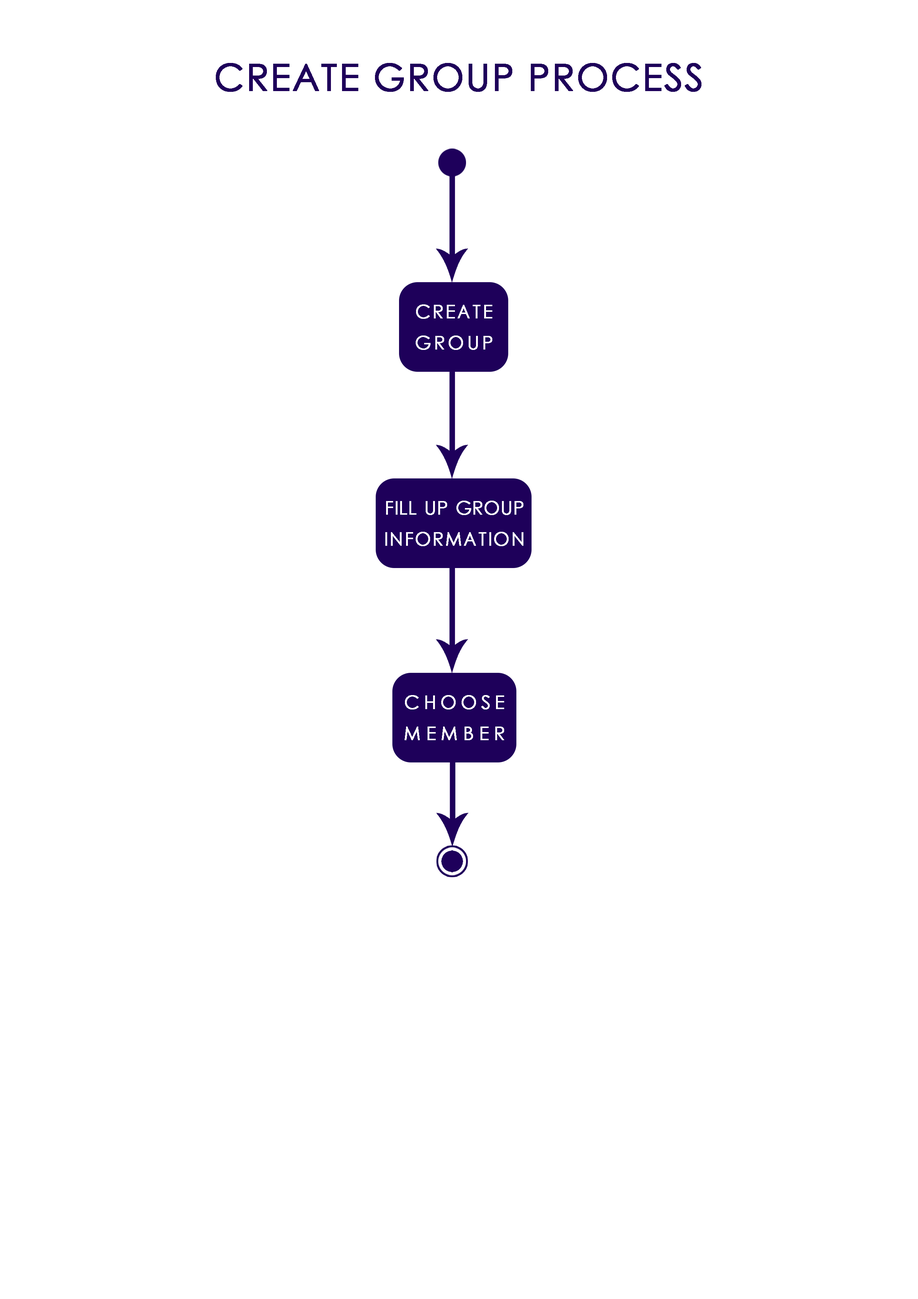
<style>
.page{position:relative;width:918px;height:1299px;background:#ffffff}
.page>*{position:absolute;margin:0}
.t1{font:37px "CenturyGothic";letter-spacing:0.025em;color:#1e005a;text-transform:uppercase;font-weight:bold}
.t2{font:18.5px/30.9px "CenturyGothic";letter-spacing:0.025em;color:#ffffff;text-transform:uppercase;font-weight:bold}
.t3{font:18.5px/30.9px "CenturyGothic";color:#ffffff;text-transform:uppercase;font-weight:bold}
</style>
<div class="page">
<p class="t1" style="left:216px;top:63px;width:486px;height:29px">create group process</p>
<p class="t2" style="left:416px;top:304px;width:76px;height:46px;text-align:justify">create group</p>
<p class="t3" style="left:385px;top:501px;width:138px;height:45px;text-align:justify">fill up group information</p>
<p class="t2" style="left:405px;top:695px;width:99px;height:45px;text-align:justify">choose member</p>
</div>
